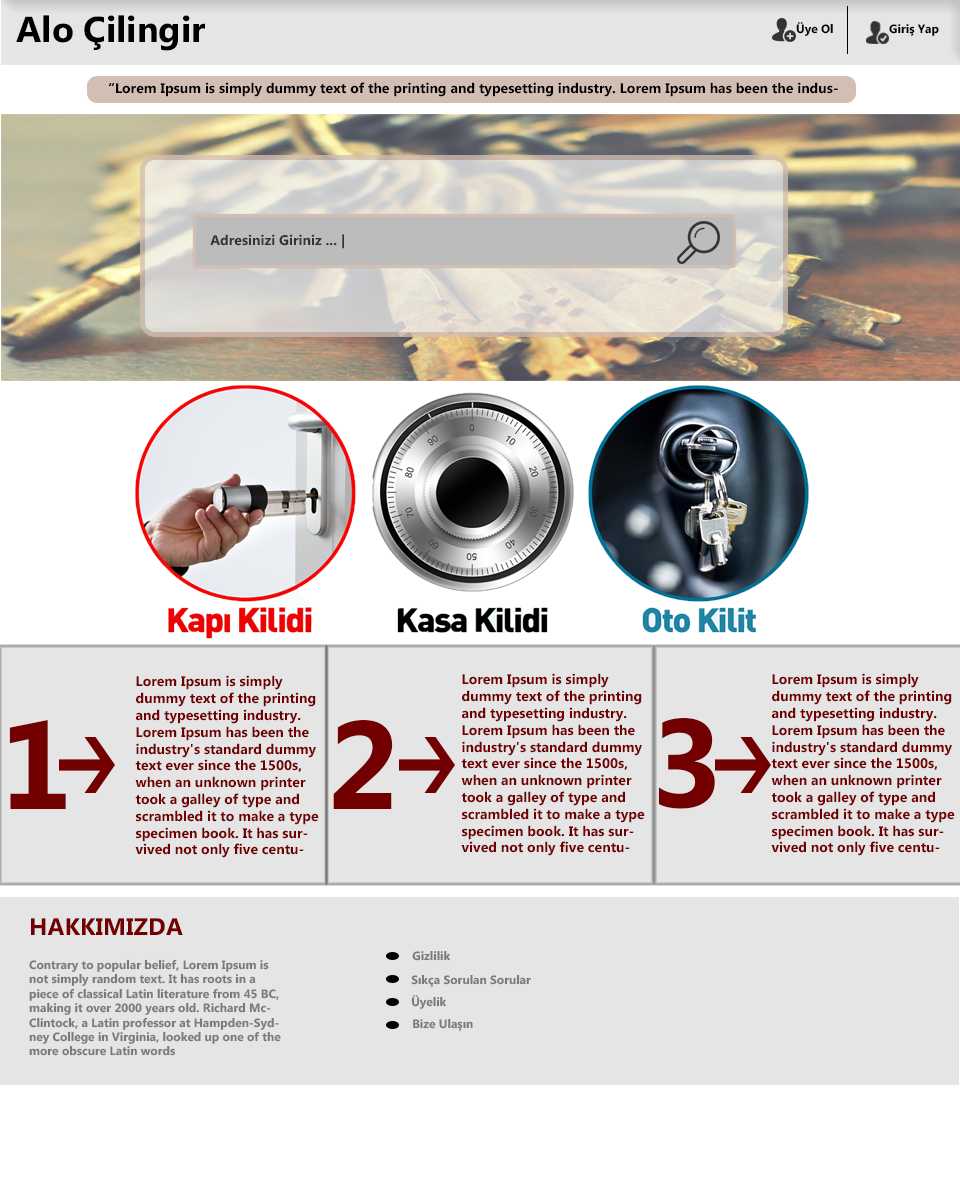
<style>
.page{position:relative;width:960px;height:1200px;background:#e5e5e5}
.page>*{position:absolute;margin:0}
.t1{font:36px "MicrosoftPhagsPa-Bold";color:#000000}
.t2{font:12px "MicrosoftPhagsPa-Bold";color:#000000}
.t3{font:14px "MicrosoftPhagsPa-Bold";color:#000000}
.t4{font:14px "MicrosoftPhagsPa-Bold";color:#393030}
.t5{font:14px "MicrosoftPhagsPa-Bold";color:#720000}
.t6{font:125px "MicrosoftPhagsPa-Bold";color:#720000}
.t7{font:24px "MicrosoftPhagsPa-Bold";color:#720000}
.t8{font:12px "MicrosoftPhagsPa-Bold";color:#7e7979}
</style>
<div class="page">
<p class="t1" style="left:16px;top:15px;width:189px;height:36px">Alo Çilingir</p>
<p class="t2" style="left:796px;top:22px;width:37px;height:14px">Üye Ol</p>
<p class="t2" style="left:889px;top:24px;width:50px;height:12px">Giriş Yap</p>
<p class="t3" style="left:108px;top:82px;width:730px;height:15px">“Lorem Ipsum is simply dummy text of the printing and typesetting industry. Lorem Ipsum has been the industry's standard”</p>
<p class="t4" style="left:210px;top:234px;width:134px;height:15px">Adresinizi Giriniz ... |</p>
<p class="t5" style="left:135px;top:675px;width:184px;height:183px">Lorem Ipsum is simply dummy text of the printing and typesetting industry. Lorem Ipsum has been the industry's standard dummy text ever since the 1500s, when an unknown printer took a galley of type and scrambled it to make a type specimen book. It has survived not only five centuries</p>
<p class="t5" style="left:461px;top:673px;width:184px;height:183px">Lorem Ipsum is simply dummy text of the printing and typesetting industry. Lorem Ipsum has been the industry's standard dummy text ever since the 1500s, when an unknown printer took a galley of type and scrambled it to make a type specimen book. It has survived not only five centuries</p>
<p class="t5" style="left:771px;top:673px;width:184px;height:183px">Lorem Ipsum is simply dummy text of the printing and typesetting industry. Lorem Ipsum has been the industry's standard dummy text ever since the 1500s, when an unknown printer took a galley of type and scrambled it to make a type specimen book. It has survived not only five centuries</p>
<p class="t6" style="left:9px;top:720px;width:57px;height:89px">1</p>
<p class="t6" style="left:333px;top:720px;width:60px;height:89px">2</p>
<p class="t6" style="left:658px;top:718px;width:57px;height:91px">3</p>
<p class="t7" style="left:31px;top:918px;width:152px;height:17px">HAKKIMIZDA</p>
<p class="t8" style="left:412px;top:950px;width:39px;height:11px">Gizlilik</p>
<p class="t8" style="left:29px;top:959px;width:252px;height:97px">Contrary to popular belief, Lorem Ipsum is not simply random text. It has roots in a piece of classical Latin literature from 45 BC, making it over 2000 years old. Richard McClintock, a Latin professor at Hampden-Sydney College in Virginia, looked up one of the more obscure Latin words</p>
<p class="t8" style="left:411px;top:974px;width:120px;height:13px">Sıkça Sorulan Sorular</p>
<p class="t8" style="left:411px;top:995px;width:36px;height:14px">Üyelik</p>
<p class="t8" style="left:413px;top:1018px;width:60px;height:13px">Bize Ulaşın</p>
</div>
